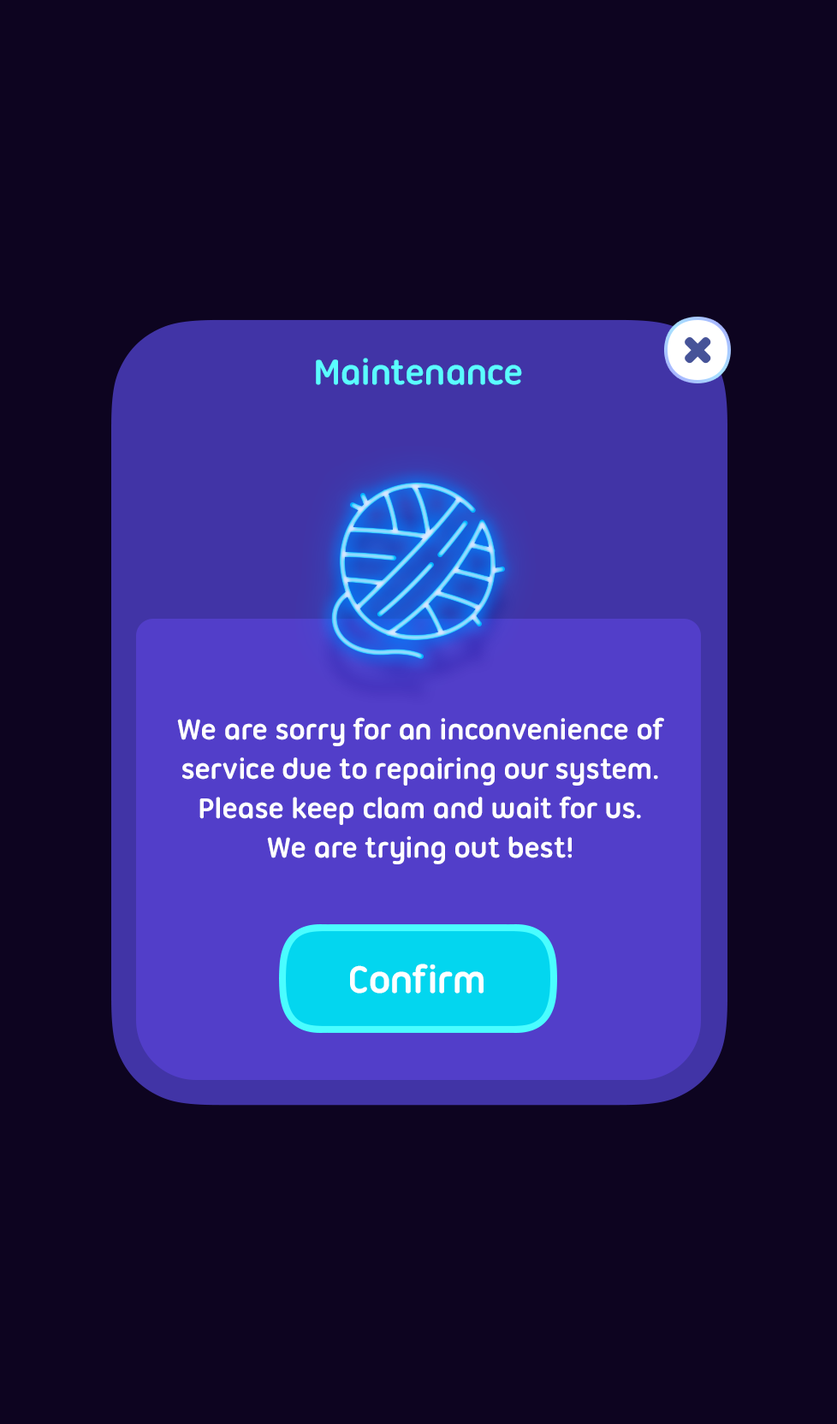
<style>
.page{position:relative;width:837px;height:1424px;background:#0d0420}
.page>*{position:absolute;margin:0}
.t1{font:37.7px "UbuntuTitling-Bold";letter-spacing:-0.025em;color:#5afdff}
.t2{font:30.8px/39.4px "UbuntuTitling-Bold";letter-spacing:-0.025em;color:#ffffff}
.t3{font:41.1px "UbuntuTitling-Bold";letter-spacing:-0.025em;color:#ffffff}
</style>
<div class="page">
<p class="t1" style="left:316px;top:358px;width:206px;height:27px">Maintenance</p>
<p class="t2" style="left:177px;top:717px;width:487px;height:148px;text-align:center">We are sorry for an inconvenience of<br>service due to repairing our system.<br>Please keep clam and wait for us.<br>We are trying out best!</p>
<p class="t3" style="left:350px;top:964px;width:134px;height:30px">Confirm</p>
</div>
